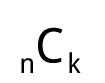
<style>
.page{position:relative;width:105px;height:83px;background:#ffffff}
.page>*{position:absolute;margin:0}
.t1{font:47.9px "DroidSans";color:#000000}
.t2{font:27.2px "DroidSans";color:#000000}
</style>
<div class="page">
<p class="t1" style="left:38px;top:27px;width:25px;height:36px">C</p>
<p class="t2" style="left:69px;top:52px;width:12px;height:21px">k</p>
<p class="t2" style="left:21px;top:58px;width:12px;height:15px">n</p>
</div>
